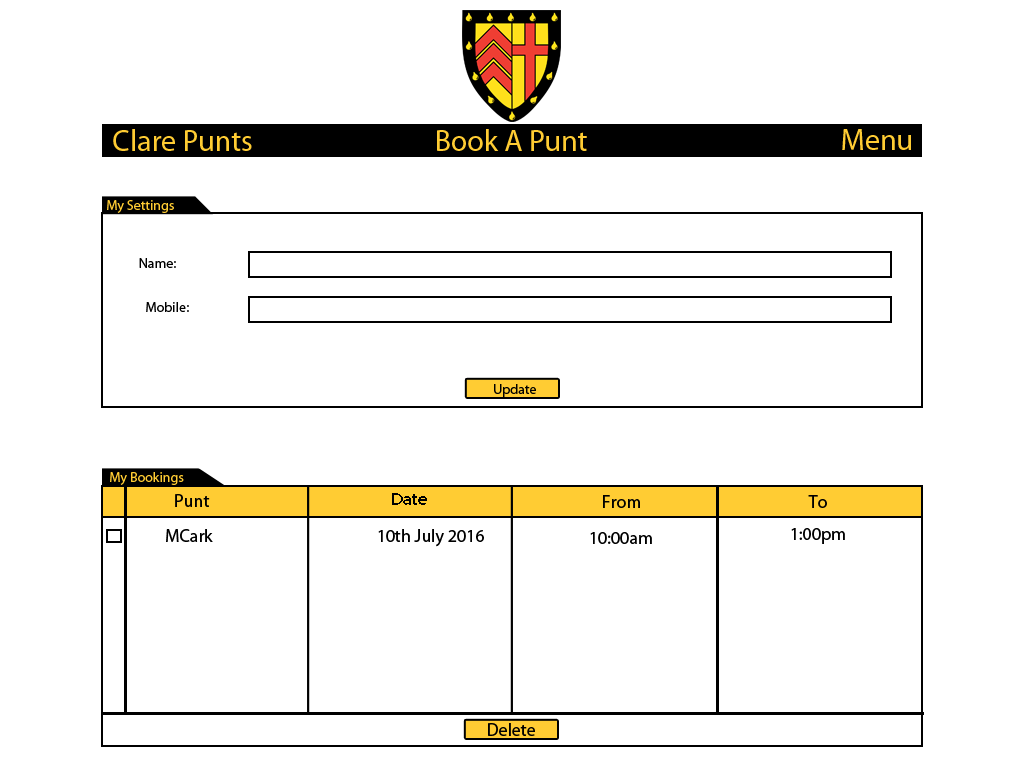
<style>
.page{position:relative;width:1024px;height:768px;background:#ffffff}
.page>*{position:absolute;margin:0}
.t1{font:30px "MyriadPro-Regular";color:#ffcc33}
.t2{font:14px "MyriadPro-Regular";color:#ffcc33}
.t3{font:14px "MyriadPro-Regular";color:#000000}
.t4{font:18px "MyriadPro-Regular";color:#000000}
</style>
<div class="page">
<p class="t1" style="left:113px;top:129px;width:139px;height:22px">Clare Punts</p>
<p class="t1" style="left:437px;top:129px;width:150px;height:22px">Book A Punt</p>
<p class="t1" style="left:842px;top:129px;width:69px;height:21px">Menu</p>
<p class="t2" style="left:107px;top:200px;width:67px;height:13px">My Settings</p>
<p class="t3" style="left:139px;top:258px;width:37px;height:10px">Name:</p>
<p class="t3" style="left:146px;top:302px;width:43px;height:10px">Mobile:</p>
<p class="t3" style="left:494px;top:384px;width:42px;height:13px">Update</p>
<p class="t2" style="left:110px;top:472px;width:74px;height:13px">My Bookings</p>
<p class="t4" style="left:175px;top:494px;width:35px;height:13px">Punt</p>
<p class="t4" style="left:392px;top:493px;width:35px;height:12px">Date</p>
<p class="t4" style="left:603px;top:495px;width:37px;height:13px">From</p>
<p class="t4" style="left:808px;top:495px;width:19px;height:13px">To</p>
<p class="t4" style="left:166px;top:529px;width:47px;height:13px">MCark</p>
<p class="t4" style="left:378px;top:529px;width:106px;height:18px">10th July 2016</p>
<p class="t4" style="left:590px;top:532px;width:62px;height:12px">10:00am</p>
<p class="t4" style="left:791px;top:528px;width:54px;height:16px">1:00pm</p>
<p class="t4" style="left:488px;top:723px;width:47px;height:13px">Delete</p>
</div>
